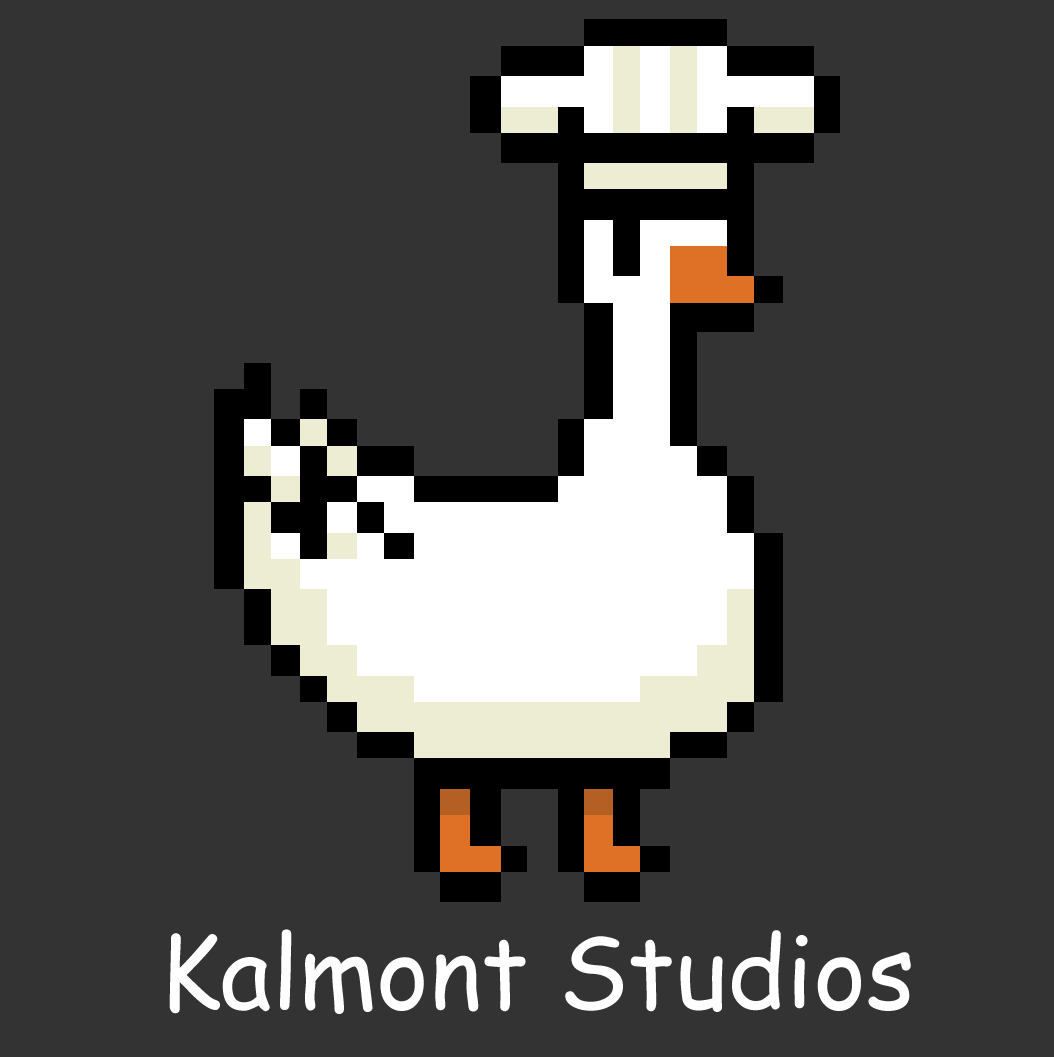
<style>
.page{position:relative;width:1054px;height:1057px;background:#333333}
.page>*{position:absolute;margin:0}
.t1{font:100px "ComicSansMS";color:#ffffff}
</style>
<div class="page">
<p class="t1" style="left:169px;top:929px;width:742px;height:85px">Kalmont Studios</p>
</div>
